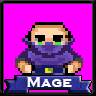
<style>
.page{position:relative;width:96px;height:96px;background:#ff00ff}
.page>*{position:absolute;margin:0}
.t1{font:15px "CopperplateGothic-Bold";color:#ffffff}
</style>
<div class="page">
<p class="t1" style="left:27px;top:77px;width:45px;height:10px">Mage</p>
</div>
